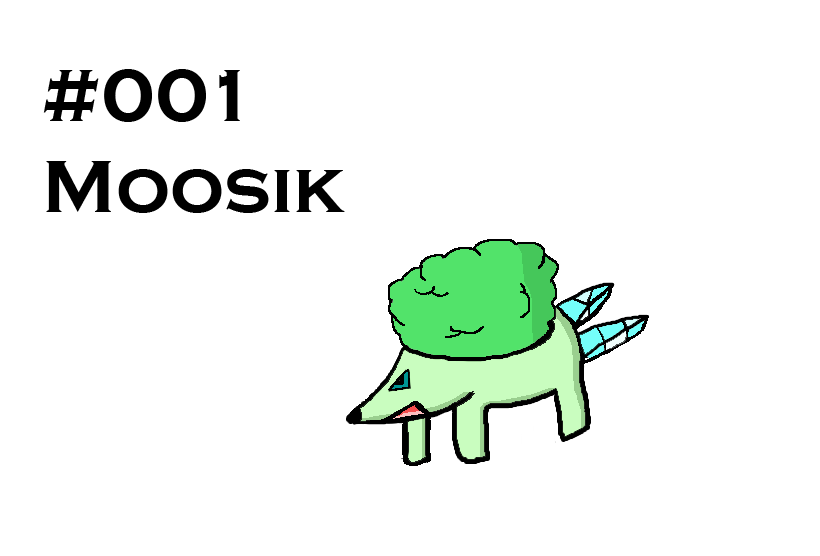
<style>
.page{position:relative;width:820px;height:556px;background:#ffffff}
.page>*{position:absolute;margin:0}
.t1{font:76px "CopperplateGothic-Bold";color:#000000}
</style>
<div class="page">
<p class="t1" style="left:43px;top:69px;width:302px;height:144px">#001<br>Moosik</p>
</div>
